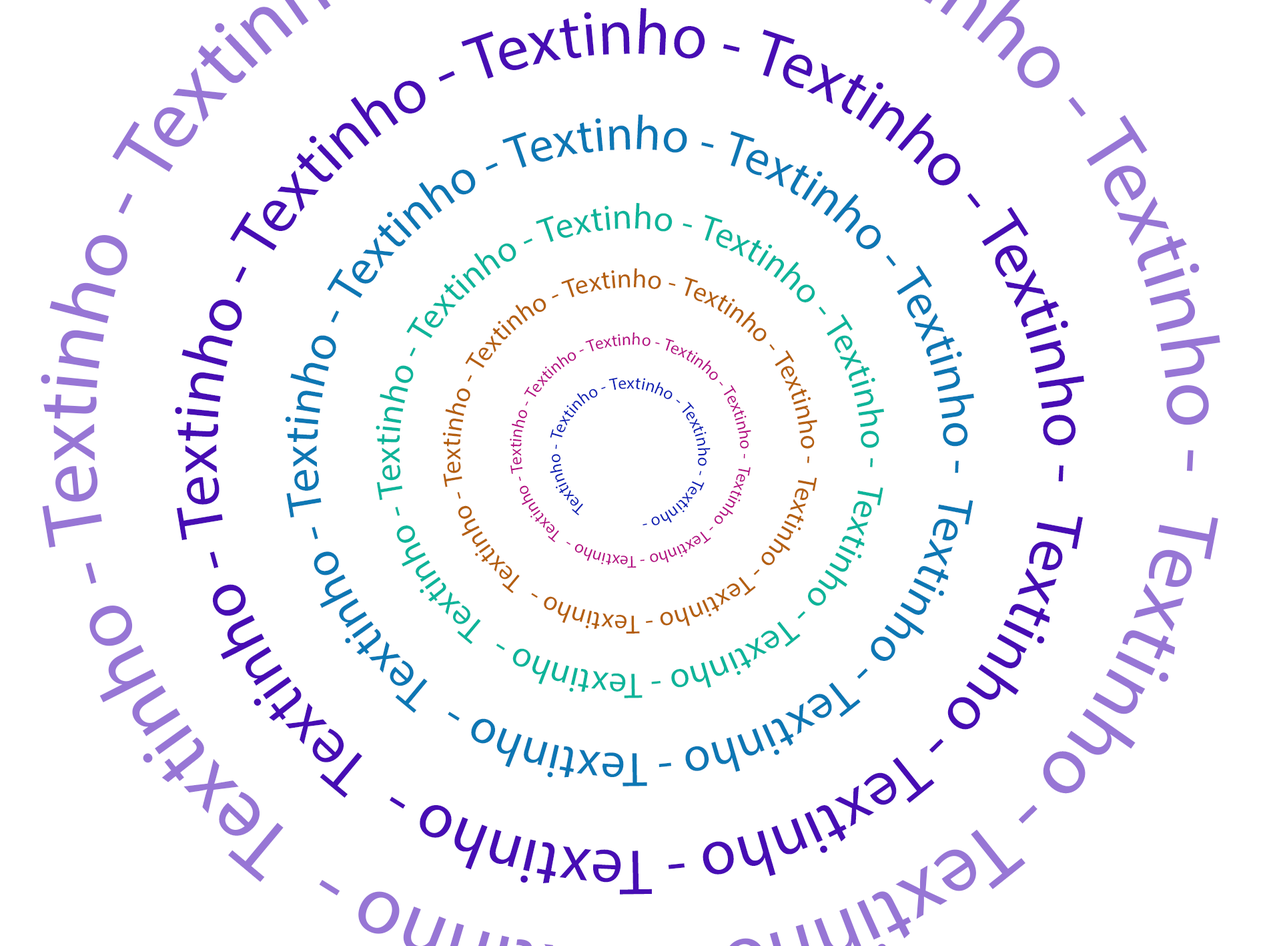
<style>
.page{position:relative;width:1261px;height:946px;background:#ffffff}
.page>*{position:absolute;margin:0}
.t1{font:64.3px "MyriadPro-Regular";color:#470db4}
.t2{font:48.7px "MyriadPro-Regular";color:#0d77b4}
.t3{font:35.9px "MyriadPro-Regular";color:#0db49a}
.t4{font:26.5px "MyriadPro-Regular";color:#b45f0d}
.t5{font:17px "MyriadPro-Regular";color:#b40d83}
.t6{font:17px "MyriadPro-Regular";color:#0d20b4}
</style>
<div class="page">
<p class="t1" style="left:175px;top:8px;width:909px;height:886px">Textinho - Textinho - Textinho - Textinho - Textinho - Textinho -  Textinho - Textinho - Textinho -</p>
<p class="t2" style="left:285px;top:114px;width:689px;height:672px">Textinho - Textinho - Textinho - Textinho - Textinho - Textinho -  Textinho - Textinho - Textinho -</p>
<p class="t3" style="left:376px;top:203px;width:508px;height:495px">Textinho - Textinho - Textinho - Textinho - Textinho - Textinho -  Textinho - Textinho - Textinho -</p>
<p class="t4" style="left:442px;top:268px;width:375px;height:365px">Textinho - Textinho - Textinho - Textinho - Textinho - Textinho -  Textinho - Textinho - Textinho -</p>
<p class="t5" style="left:510px;top:332px;width:241px;height:236px">Textinho - Textinho - Textinho - Textinho - Textinho - Textinho -  Textinho - Textinho - Textinho -</p>
<p class="t6" style="left:550px;top:377px;width:161px;height:148px">Textinho - Textinho - Textinho - Textinho - Textinho - Textinho -  Textinho - Textinho - Textinho -</p>
</div>
